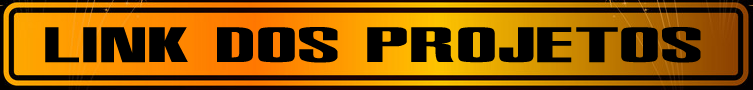
<style>
.page{position:relative;width:753px;height:90px}
.page>*{position:absolute;margin:0}
.t1{font:39.6px "Metal-Gear-Solid-2";color:#000000;scale:2.97 1}
</style>
<div class="page">
<p class="t1" style="left:45px;top:27px;width:656px;height:36px">Link dos Projetos</p>
</div>
